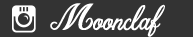
<style>
.page{position:relative;width:193px;height:37px;background:#333333}
.page>*{position:absolute;margin:0}
.t1{font:27.8px "ChristmasTimePersonalUse-Regula";color:#ffffff}
</style>
<div class="page">
<p class="t1" style="left:50px;top:3px;width:115px;height:34px">Moonclaf</p>
</div>
